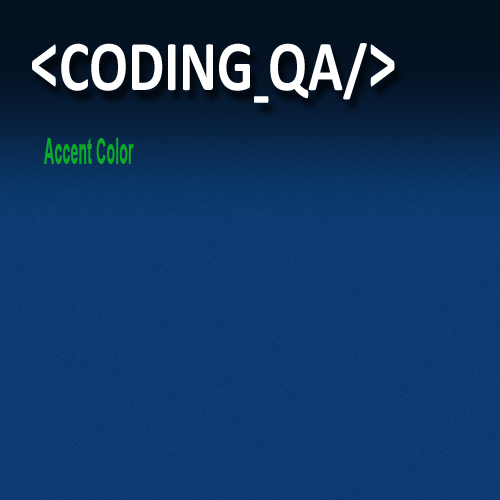
<style>
.page{position:relative;width:500px;height:500px}
.page>*{position:absolute;margin:0}
.t1{font:72px "Calibri-Bold";color:#ffffff;scale:0.8 1}
.t2{font:86.4px "Calibri-Bold";color:#ffffff;scale:0.67 1}
.t3{font:72px "Calibri-Bold";color:#ffffff;scale:0.4 1}
.t4{font:64.8px "Calibri-Bold";color:#ffffff;scale:0.89 1}
.t5{font:36px "Arial-BoldMT";color:#0caa2a;scale:0.4 1}
</style>
<div class="page">
<p class="t1" style="left:32px;top:43px;width:363px;height:60px"><span class="t2">&lt;</span>CODING<span class="t3">_</span>QA<span class="t4">/</span><span class="t2">&gt;</span></p>
<p class="t5" style="left:43px;top:138px;width:91px;height:26px">Accent Color</p>
</div>
